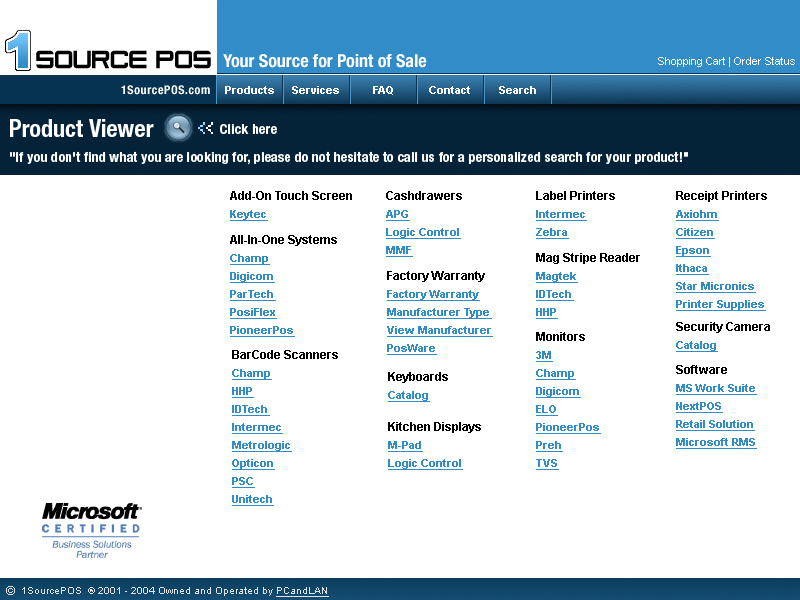
<style>
.page{position:relative;width:800px;height:600px;background:#ffffff}
.page>*{position:absolute;margin:0}
.t1{font:18px "HelveticaNeue-BoldCond";color:#ffffff}
.t2{font:11px "ArialMT";color:#ffffff}
.t3{font:12px "HelveticaNeue-BoldCond";letter-spacing:0.05em;color:#ffffff}
.t4{font:11px "Arial-BoldMT";color:#ffffff}
.t5{font:24px "HelveticaNeue-BoldCond";color:#ffffff}
.t6{font:16px "Pixel";letter-spacing:-0.075em;color:#98d6ff}
.t7{font:16px "Pixel";letter-spacing:-0.075em;color:#ffffff}
.t8{font:14px "HelveticaNeue-BoldCond";letter-spacing:0.01em;color:#ffffff}
.t9{font:12px/18px "Arial-BoldMT";color:#000000}
.t10{font:11px/18px "Arial-BoldMT";color:#318cc7;text-decoration:underline}
.t11{font:12px "ArialMT";color:#dfe4e7}
.t12{font:10px "ArialMT";color:#dfe4e7}
.t13{font:10px "ArialMT";color:#dfe4e7;text-decoration:underline}
</style>
<div class="page">
<p class="t1" style="left:223px;top:54px;width:204px;height:14px">Your Source for Point of Sale</p>
<p class="t2" style="left:658px;top:57px;width:137px;height:10px">Shopping Cart | Order Status</p>
<p class="t2" style="left:658px;top:57px;width:137px;height:10px">Shopping Cart | Order Status</p>
<p class="t3" style="left:121px;top:85px;width:89px;height:10px">1SourcePOS.com</p>
<p class="t4" style="left:225px;top:86px;width:49px;height:8px">Products</p>
<p class="t4" style="left:292px;top:86px;width:47px;height:8px">Services</p>
<p class="t4" style="left:373px;top:86px;width:20px;height:9px">FAQ</p>
<p class="t4" style="left:429px;top:86px;width:41px;height:8px">Contact</p>
<p class="t4" style="left:499px;top:86px;width:37px;height:8px">Search</p>
<p class="t5" style="left:10px;top:119px;width:144px;height:18px">Product Viewer</p>
<p class="t6" style="left:198px;top:122px;width:15px;height:12px">&lt;<span class="t7">&lt;</span></p>
<p class="t8" style="left:220px;top:124px;width:57px;height:10px">Click here</p>
<p class="t8" style="left:10px;top:151px;width:678px;height:14px">"If you don't find what you are looking for, please do not hesitate to call us for a personalized search for your product!"</p>
<p class="t9" style="left:230px;top:191px;width:122px;height:30px">Add-On Touch Screen<br><span class="t10">Keytec</span></p>
<p class="t10" style="left:386px;top:191px;width:76px;height:66px"><span class="t9">Cashdrawers<br></span>APG<br>Logic Control<br>MMF</p>
<p class="t9" style="left:536px;top:191px;width:79px;height:48px">Label Printers<br><span class="t10">Intermec<br>Zebra</span></p>
<p class="t10" style="left:676px;top:191px;width:91px;height:120px"><span class="t9">Receipt Printers<br></span>Axiohm<br>Citizen<br>Epson<br>Ithaca<br>Star Micronics<br>Printer Supplies</p>
<p class="t10" style="left:230px;top:235px;width:107px;height:102px"><span class="t9">All-In-One Systems<br></span>Champ<br>Digicom<br>ParTech<br>PosiFlex<br>PioneerPos</p>
<p class="t9" style="left:536px;top:253px;width:104px;height:66px">Mag Stripe Reader<br><span class="t10">Magtek<br>IDTech<br>HHP</span></p>
<p class="t10" style="left:387px;top:271px;width:106px;height:84px"><span class="t9">Factory Warranty<br></span>Factory Warranty<br>Manufacturer Type<br>View Manufacturer<br>PosWare</p>
<p class="t9" style="left:676px;top:322px;width:94px;height:30px">Security Camera<br><span class="t10">Catalog</span></p>
<p class="t10" style="left:536px;top:332px;width:65px;height:138px"><span class="t9">Monitors<br></span>3M<br>Champ<br>Digicom<br>ELO<br>PioneerPos<br>Preh<br>TVS</p>
<p class="t10" style="left:232px;top:350px;width:106px;height:156px"><span class="t9">BarCode Scanners<br></span>Champ<br>HHP<br>IDTech<br>Intermec<br>Metrologic<br>Opticon<br>PSC<br>Unitech</p>
<p class="t10" style="left:676px;top:365px;width:81px;height:84px"><span class="t9">Software<br></span>MS Work Suite<br>NextPOS<br>Retail Solution<br>Microsoft RMS</p>
<p class="t9" style="left:388px;top:372px;width:60px;height:30px">Keyboards<br><span class="t10">Catalog</span></p>
<p class="t10" style="left:388px;top:422px;width:93px;height:48px"><span class="t9">Kitchen Displays<br></span>M-Pad<br>Logic Control</p>
<p class="t11" style="left:6px;top:586px;width:9px;height:9px">©</p>
<p class="t12" style="left:22px;top:587px;width:307px;height:10px">1SourcePOS  ® 2001 - 2004 Owned and Operated by <span class="t13">PCandLAN</span></p>
</div>
